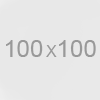
<style>
.page{position:relative;width:100px;height:100px;background:#e8e8e8}
.page>*{position:absolute;margin:0}
.t1{font:24px "ArialMT";color:#999999}
.t2{font:16px "ArialMT";color:#999999}
</style>
<div class="page">
<p class="t1" style="left:6px;top:40px;width:90px;height:17px">100 <span class="t2">X</span>100</p>
</div>
